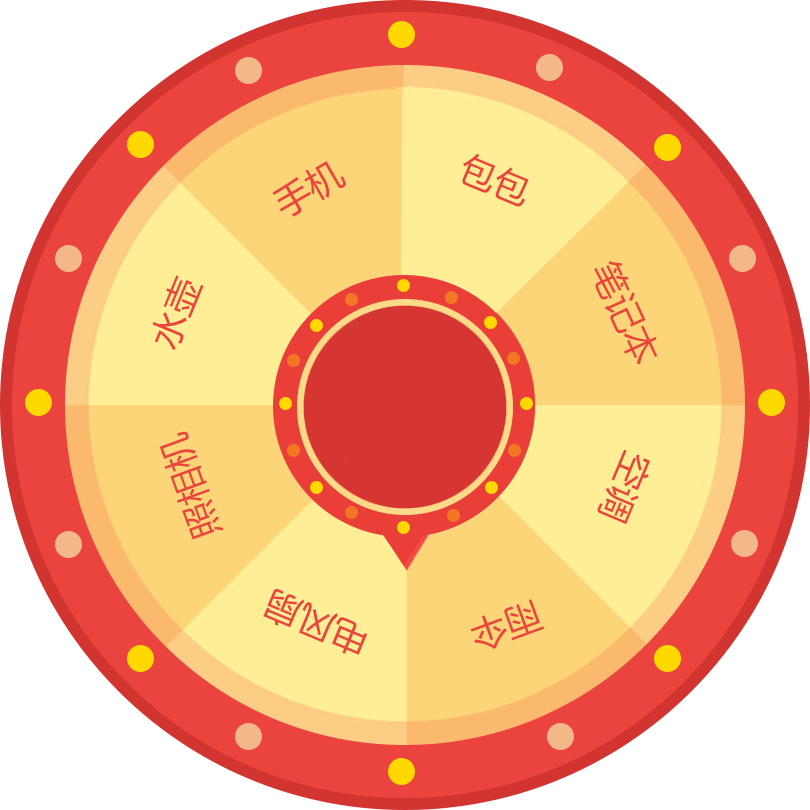
<style>
.page{position:relative;width:810px;height:810px;background:#ffffff}
.page>*{position:absolute;margin:0}
.t1{font:36px "MicrosoftYaHei";color:#eb433d}
</style>
<div class="page">
<p class="t1" style="left:272px;top:161px;width:74px;height:56px;rotate:-30deg">手机</p>
<p class="t1" style="left:462px;top:153px;width:67px;height:54px;rotate:23deg">包包</p>
<p class="t1" style="left:594px;top:261px;width:64px;height:104px;rotate:65deg">笔记本</p>
<p class="t1" style="left:152px;top:275px;width:52px;height:75px;rotate:-68deg">水壶</p>
<p class="t1" style="left:159px;top:431px;width:64px;height:109px;rotate:-110deg">照相机</p>
<p class="t1" style="left:597px;top:449px;width:54px;height:75px;rotate:113deg">空调</p>
<p class="t1" style="left:263px;top:589px;width:105px;height:66px;rotate:-157deg">电风扇</p>
<p class="t1" style="left:470px;top:599px;width:75px;height:51px;rotate:160deg">雨伞</p>
</div>
